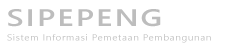
<style>
.page{position:relative;width:227px;height:52px;background:#ffffff}
.page>*{position:absolute;margin:0}
.t1{font:24px "SegoeUI-Semibold";letter-spacing:0.07em;color:#bdbdbd;scale:1.3 1}
.t2{font:8.7px "SegoeUI";letter-spacing:0.05em;color:#c0c0c0;scale:1.15 1}
</style>
<div class="page">
<p class="t1" style="left:8px;top:9px;width:153px;height:18px">SIPEPENG</p>
<p class="t2" style="left:7px;top:34px;width:204px;height:9px">Sistem Informasi Pemetaan Pembangunan</p>
</div>
